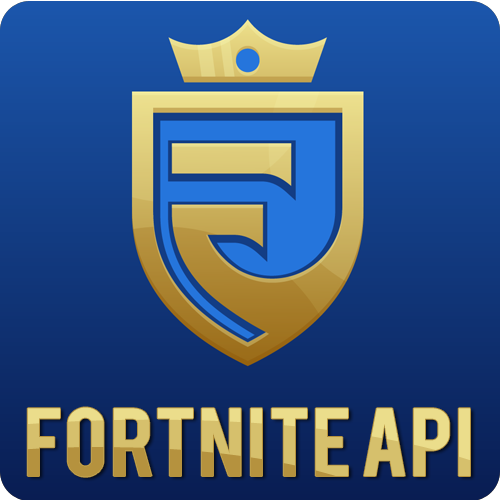
<style>
.page{position:relative;width:500px;height:500px}
.page>*{position:absolute;margin:0}
.t1{font:75.9px "Bebas";scale:1.11 1}
</style>
<div class="page">
<p class="t1" style="left:27px;top:407px;width:443px;height:70px">FORTNITE API</p>
</div>
